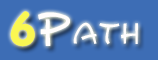
<style>
.page{position:relative;width:158px;height:60px;background:#3d6db5}
.page>*{position:absolute;margin:0}
.t1{font:36px "FZKATJW--GB1-0";letter-spacing:0.075em;color:#fffdfc}
.t2{font:48px "FZYHJW--GB1-0";letter-spacing:0.075em;color:#faf752}
.t3{font:48px "FZKATJW--GB1-0";letter-spacing:0.075em;color:#fffdfc}
</style>
<div class="page">
<p class="t1" style="left:10px;top:11px;width:128px;height:36px"><span class="t2">6</span><span class="t3">P</span>ath</p>
</div>
